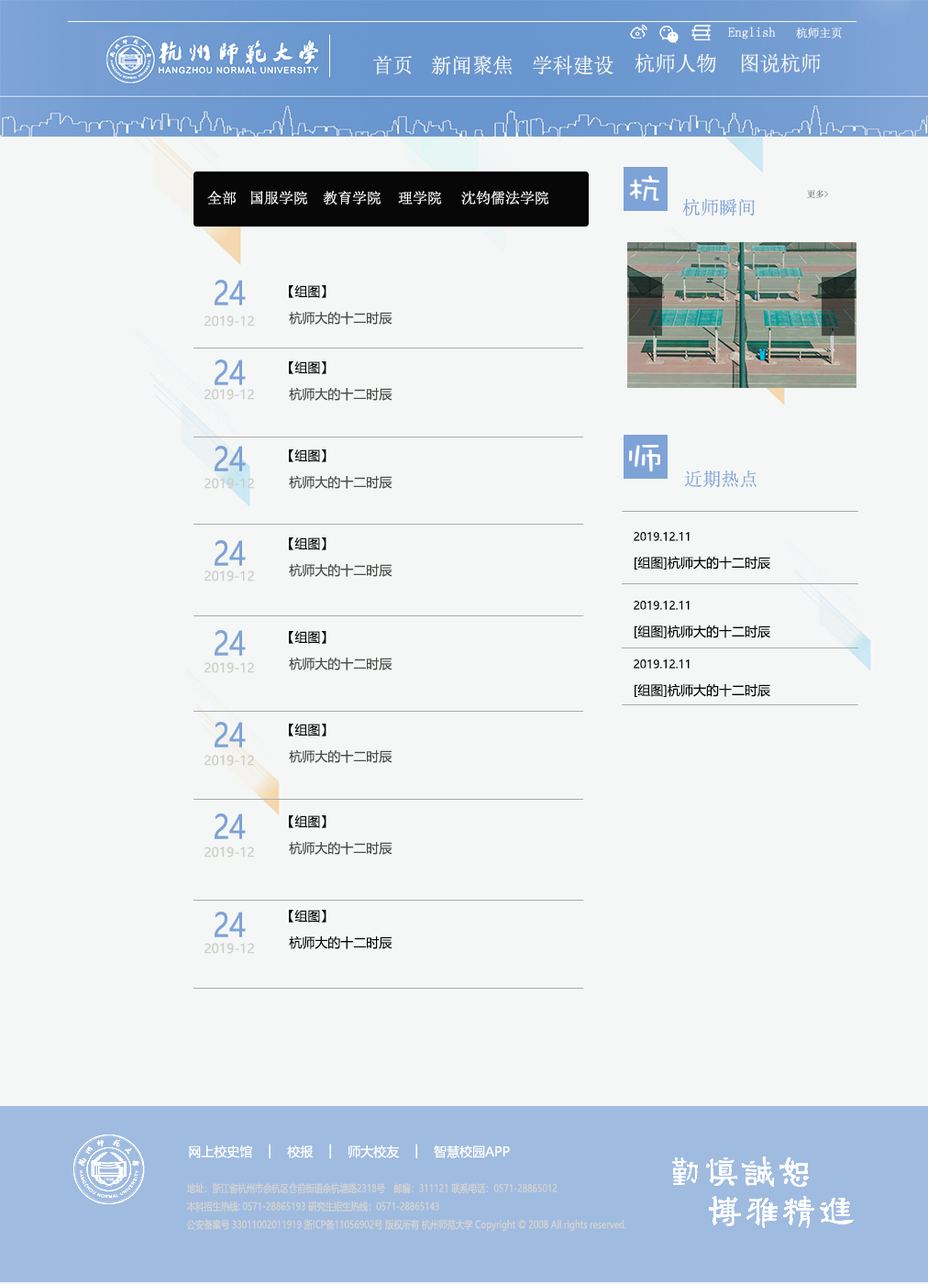
<style>
.page{position:relative;width:928px;height:1284px;background:#f5f7f6}
.page>*{position:absolute;margin:0}
.t1{font:13.5px "SimSun";color:#f5f7f6}
.t2{font:11.7px "SimSun";color:#f5f7f6}
.t3{font:20.5px "SimSun";color:#f5f7f6}
.t4{font:14.7px "SimSun";color:#fafdfb}
.t5{font:8.6px "SimSun"}
.t6{font:18.5px "SimSun";color:#7da2d6}
.t7{font:32.9px "MicrosoftYaHei";color:#7ea3d7;scale:0.85 1}
.t8{font:12.8px "MicrosoftYaHei";color:#040404}
.t9{font:12.8px "MicrosoftYaHei";color:#cfcfca}
.t10{font:12.8px "MicrosoftYaHei";color:#4a4b48}
.t11{font:32.9px "MicrosoftYaHei";color:#7da2d5;scale:0.85 1}
.t12{font:18.5px "SimSun";color:#81a4d8}
.t13{font:11.3px "MicrosoftYaHei";color:#040404}
.t14{font:32.9px "MicrosoftYaHei";color:#7da2d6;scale:0.85 1}
.t15{font:32.9px "MicrosoftYaHei";color:#80a4d6;scale:0.85 1}
.t16{font:12.8px "MicrosoftYaHei";color:#030303}
.t17{font:12.8px "MicrosoftYaHei";color:#fefffc}
.t18{font:10.4px "MicrosoftYaHei";color:#d3d4d1;scale:0.82 1}
</style>
<div class="page">
<p class="t1" style="left:728px;top:27px;width:48px;height:12px">English</p>
<p class="t2" style="left:796px;top:28px;width:46px;height:11px">杭师主页</p>
<p class="t3" style="left:635px;top:53px;width:81px;height:20px">杭师人物</p>
<p class="t3" style="left:742px;top:53px;width:79px;height:20px">图说杭师</p>
<p class="t3" style="left:373px;top:55px;width:39px;height:20px">首页</p>
<p class="t3" style="left:431px;top:55px;width:82px;height:20px">新闻聚焦</p>
<p class="t3" style="left:533px;top:55px;width:81px;height:20px">学科建设</p>
<p class="t4" style="left:207px;top:191px;width:30px;height:14px">全部</p>
<p class="t4" style="left:251px;top:191px;width:57px;height:14px">国服学院</p>
<p class="t4" style="left:323px;top:191px;width:59px;height:14px">教育学院</p>
<p class="t4" style="left:398px;top:191px;width:44px;height:14px">理学院</p>
<p class="t4" style="left:461px;top:191px;width:89px;height:14px">沈钧儒法学院</p>
<p class="t5" style="left:807px;top:190px;width:21px;height:8px">更多&gt;</p>
<p class="t6" style="left:683px;top:198px;width:72px;height:19px">杭师瞬间</p>
<p class="t7" style="left:215px;top:280px;width:31px;height:25px">24</p>
<p class="t8" style="left:289px;top:285px;width:38px;height:13px">【组图】</p>
<p class="t9" style="left:205px;top:316px;width:49px;height:11px">2019-12</p>
<p class="t10" style="left:289px;top:311px;width:104px;height:14px">杭师大的十二时辰</p>
<p class="t7" style="left:215px;top:360px;width:31px;height:25px">24</p>
<p class="t8" style="left:289px;top:361px;width:38px;height:13px">【组图】</p>
<p class="t9" style="left:205px;top:389px;width:49px;height:11px">2019-12</p>
<p class="t10" style="left:289px;top:387px;width:104px;height:14px">杭师大的十二时辰</p>
<p class="t11" style="left:215px;top:446px;width:31px;height:26px">24</p>
<p class="t8" style="left:289px;top:450px;width:38px;height:12px">【组图】</p>
<p class="t12" style="left:684px;top:470px;width:73px;height:18px">近期热点</p>
<p class="t9" style="left:205px;top:478px;width:49px;height:11px">2019-12</p>
<p class="t10" style="left:289px;top:475px;width:104px;height:14px">杭师大的十二时辰</p>
<p class="t13" style="left:634px;top:532px;width:56px;height:9px">2019.12.11</p>
<p class="t14" style="left:215px;top:540px;width:31px;height:26px">24</p>
<p class="t8" style="left:289px;top:538px;width:38px;height:12px">【组图】</p>
<p class="t8" style="left:635px;top:556px;width:136px;height:14px">[组图]杭师大的十二时辰</p>
<p class="t10" style="left:289px;top:563px;width:104px;height:14px">杭师大的十二时辰</p>
<p class="t9" style="left:205px;top:571px;width:49px;height:11px">2019-12</p>
<p class="t13" style="left:634px;top:601px;width:56px;height:9px">2019.12.11</p>
<p class="t8" style="left:635px;top:625px;width:136px;height:14px">[组图]杭师大的十二时辰</p>
<p class="t15" style="left:215px;top:630px;width:31px;height:26px">24</p>
<p class="t8" style="left:289px;top:631px;width:38px;height:13px">【组图】</p>
<p class="t9" style="left:205px;top:662px;width:49px;height:11px">2019-12</p>
<p class="t10" style="left:289px;top:657px;width:104px;height:14px">杭师大的十二时辰</p>
<p class="t13" style="left:634px;top:660px;width:56px;height:9px">2019.12.11</p>
<p class="t8" style="left:635px;top:683px;width:136px;height:14px">[组图]杭师大的十二时辰</p>
<p class="t7" style="left:215px;top:722px;width:31px;height:26px">24</p>
<p class="t8" style="left:289px;top:724px;width:38px;height:13px">【组图】</p>
<p class="t10" style="left:289px;top:750px;width:104px;height:13px">杭师大的十二时辰</p>
<p class="t9" style="left:205px;top:755px;width:49px;height:11px">2019-12</p>
<p class="t14" style="left:215px;top:814px;width:31px;height:25px">24</p>
<p class="t8" style="left:289px;top:816px;width:38px;height:12px">【组图】</p>
<p class="t10" style="left:289px;top:841px;width:104px;height:14px">杭师大的十二时辰</p>
<p class="t9" style="left:205px;top:847px;width:49px;height:11px">2019-12</p>
<p class="t7" style="left:215px;top:912px;width:31px;height:26px">24</p>
<p class="t8" style="left:289px;top:910px;width:38px;height:13px">【组图】</p>
<p class="t16" style="left:289px;top:936px;width:104px;height:14px">杭师大的十二时辰</p>
<p class="t9" style="left:205px;top:943px;width:49px;height:11px">2019-12</p>
<p class="t17" style="left:189px;top:1144px;width:321px;height:15px">网上校史馆　│　校报　│　师大校友　│　智慧校园APP</p>
<p class="t18" style="left:186px;top:1183px;width:441px;height:49px">地址：浙江省杭州市余杭区仓前街道余杭塘路2318号　邮编：311121 联系电话：0571-28865012<br>本科招生热线: 0571-28865193 研究生招生热线：0571-28865143<br>公安备案号 33011002011919 浙ICP备11056902号 版权所有 杭州师范大学 Copyright © 2008 All rights reserved.</p>
</div>
